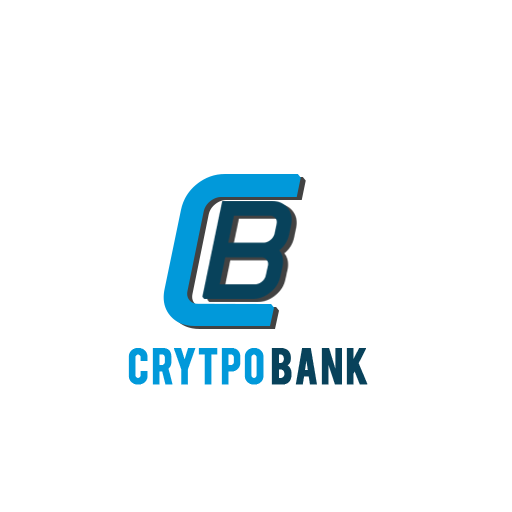
<style>
.page{position:relative;width:512px;height:512px;background:#ffffff}
.page>*{position:absolute;margin:0}
.t1{font:40px "Bebas";color:#0199da;font-weight:bold;scale:1.04 1}
.t2{font:40px "Bebas";color:#08425b;font-weight:bold;scale:1.04 1}
</style>
<div class="page">
<p class="t1" style="left:128px;top:348px;width:240px;height:37px">CRYTPO <span class="t2">Bank</span></p>
</div>
